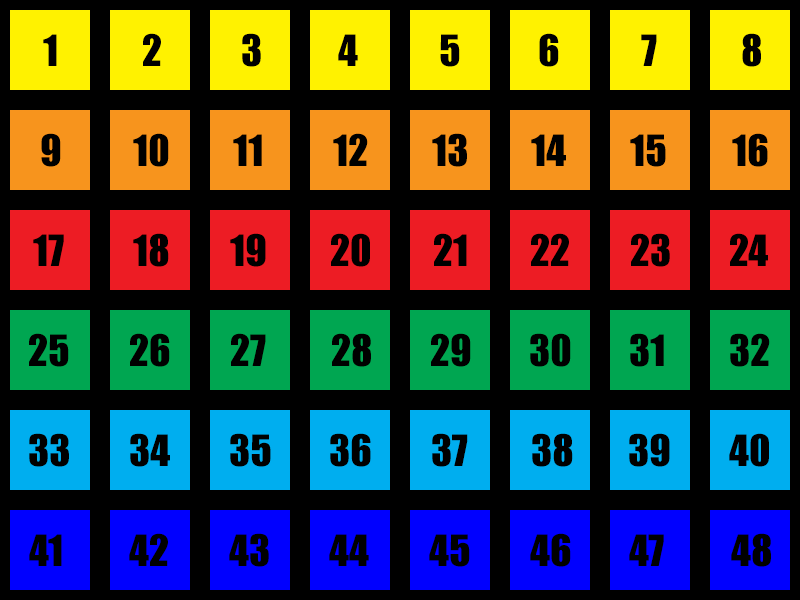
<style>
.page{position:relative;width:800px;height:600px;background:#000000}
.page>*{position:absolute;margin:0}
.t1{font:40px "Impact";color:#000000}
</style>
<div class="page">
<p class="t1" style="left:43px;top:34px;width:14px;height:32px">1</p>
<p class="t1" style="left:143px;top:33px;width:18px;height:33px">2</p>
<p class="t1" style="left:242px;top:33px;width:19px;height:34px">3</p>
<p class="t1" style="left:338px;top:34px;width:20px;height:32px">4</p>
<p class="t1" style="left:440px;top:34px;width:20px;height:33px">5</p>
<p class="t1" style="left:539px;top:33px;width:20px;height:34px">6</p>
<p class="t1" style="left:641px;top:34px;width:16px;height:32px">7</p>
<p class="t1" style="left:742px;top:33px;width:19px;height:34px">8</p>
<p class="t1" style="left:41px;top:133px;width:20px;height:34px">9</p>
<p class="t1" style="left:133px;top:133px;width:36px;height:34px">10</p>
<p class="t1" style="left:233px;top:134px;width:29px;height:32px">11</p>
<p class="t1" style="left:333px;top:133px;width:35px;height:33px">12</p>
<p class="t1" style="left:432px;top:133px;width:35px;height:34px">13</p>
<p class="t1" style="left:531px;top:134px;width:35px;height:32px">14</p>
<p class="t1" style="left:630px;top:134px;width:36px;height:33px">15</p>
<p class="t1" style="left:732px;top:133px;width:36px;height:34px">16</p>
<p class="t1" style="left:133px;top:233px;width:36px;height:34px">18</p>
<p class="t1" style="left:230px;top:233px;width:36px;height:34px">19</p>
<p class="t1" style="left:331px;top:233px;width:39px;height:34px">20</p>
<p class="t1" style="left:434px;top:233px;width:33px;height:33px">21</p>
<p class="t1" style="left:531px;top:233px;width:38px;height:33px">22</p>
<p class="t1" style="left:631px;top:233px;width:39px;height:34px">23</p>
<p class="t1" style="left:730px;top:233px;width:38px;height:33px">24</p>
<p class="t1" style="left:33px;top:234px;width:31px;height:32px">17</p>
<p class="t1" style="left:29px;top:333px;width:40px;height:34px">25</p>
<p class="t1" style="left:130px;top:333px;width:40px;height:34px">26</p>
<p class="t1" style="left:231px;top:333px;width:35px;height:33px">27</p>
<p class="t1" style="left:332px;top:333px;width:39px;height:34px">28</p>
<p class="t1" style="left:431px;top:333px;width:40px;height:34px">29</p>
<p class="t1" style="left:530px;top:333px;width:41px;height:34px">30</p>
<p class="t1" style="left:630px;top:333px;width:34px;height:34px">31</p>
<p class="t1" style="left:730px;top:333px;width:40px;height:34px">32</p>
<p class="t1" style="left:29px;top:433px;width:40px;height:34px">33</p>
<p class="t1" style="left:130px;top:433px;width:40px;height:34px">34</p>
<p class="t1" style="left:230px;top:433px;width:41px;height:34px">35</p>
<p class="t1" style="left:330px;top:433px;width:41px;height:34px">36</p>
<p class="t1" style="left:432px;top:433px;width:36px;height:34px">37</p>
<p class="t1" style="left:532px;top:433px;width:41px;height:34px">38</p>
<p class="t1" style="left:629px;top:433px;width:41px;height:34px">39</p>
<p class="t1" style="left:729px;top:433px;width:40px;height:34px">40</p>
<p class="t1" style="left:29px;top:534px;width:33px;height:32px">41</p>
<p class="t1" style="left:129px;top:533px;width:39px;height:33px">42</p>
<p class="t1" style="left:229px;top:533px;width:40px;height:34px">43</p>
<p class="t1" style="left:329px;top:534px;width:40px;height:32px">44</p>
<p class="t1" style="left:429px;top:534px;width:41px;height:33px">45</p>
<p class="t1" style="left:530px;top:533px;width:41px;height:34px">46</p>
<p class="t1" style="left:629px;top:534px;width:35px;height:32px">47</p>
<p class="t1" style="left:731px;top:533px;width:40px;height:34px">48</p>
</div>
